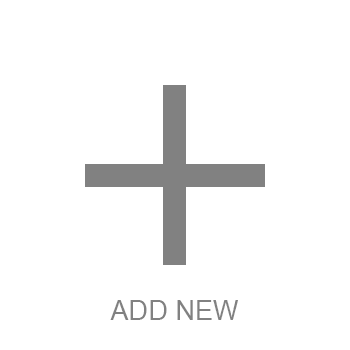
<style>
.page{position:relative;width:350px;height:350px;background:#ffffff}
.page>*{position:absolute;margin:0}
.t1{font:27.1px "ArialMT";color:#818181;text-transform:uppercase}
</style>
<div class="page">
<p class="t1" style="left:110px;top:300px;width:128px;height:20px">Add New</p>
</div>
